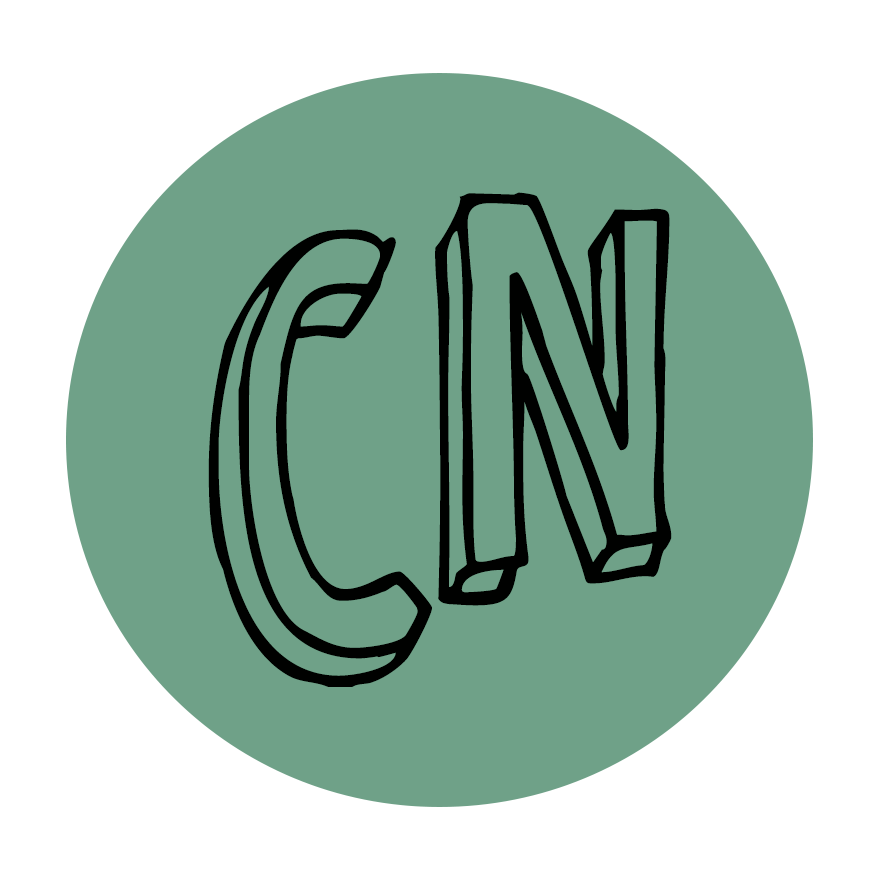
<style>
.page{position:relative;width:880px;height:880px;background:#6fa188}
.page>*{position:absolute;margin:0}
.t1{font:646.7px "DKPetitFour";color:#000100}
</style>
<div class="page">
<p class="t1" style="left:208px;top:192px;width:464px;height:495px">CN</p>
</div>
